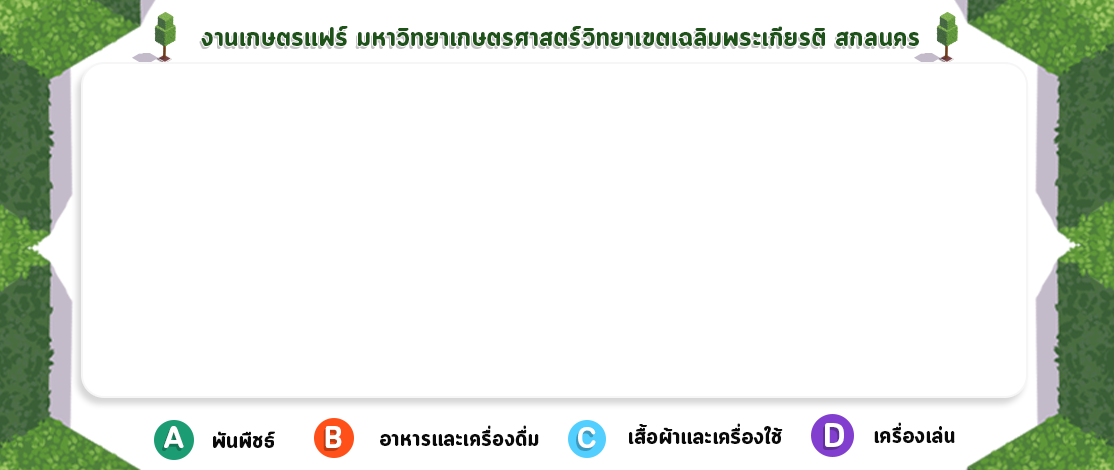
<style>
.page{position:relative;width:1114px;height:470px;background:#ffffff}
.page>*{position:absolute;margin:0}
.t1{font:27.3px "CloudSoft-Bold";color:#1d5318}
.t2{font:22.6px "CloudSoft-Bold";color:#0a0a0a}
.t3{font:33.6px "CloudSoft-Bold";color:#ffffff}
.t4{font:30.8px "CloudSoft-Bold";color:#ffffff}
.t5{font:30.7px "CloudSoft-Bold";color:#ffffff}
.t6{font:29.3px "CloudSoft-Bold";color:#ffffff}
</style>
<div class="page">
<p class="t1" style="left:201px;top:26px;width:718px;height:20px">งานเกษตรเเฟร์ มหาวิทยาเกษตรศาสตร์วิทยาเขตเฉลิมพระเกียรติ สกลนคร</p>
<p class="t2" style="left:380px;top:425px;width:159px;height:21px">อาหารเเละเครื่องดื่ม</p>
<p class="t2" style="left:629px;top:423px;width:154px;height:21px">เสาื้อผ้าเเละเครื่องใช้</p>
<p class="t3" style="left:825px;top:423px;width:19px;height:24px">D</p>
<p class="t2" style="left:874px;top:422px;width:81px;height:21px">เครื่องเล่น</p>
<p class="t4" style="left:164px;top:426px;width:20px;height:22px">A</p>
<p class="t2" style="left:213px;top:431px;width:62px;height:17px">พันพืชธ์</p>
<p class="t5" style="left:325px;top:426px;width:17px;height:22px">B</p>
<p class="t6" style="left:578px;top:427px;width:18px;height:21px">C</p>
</div>
